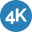
<style>
.page{position:relative;width:32px;height:32px;background:#2980b9}
.page>*{position:absolute;margin:0}
.t1{font:18px "Raleway-Bold";color:#ffffff;text-transform:uppercase}
</style>
<div class="page">
<p class="t1" style="left:5px;top:8px;width:22px;height:16px">4K</p>
</div>
